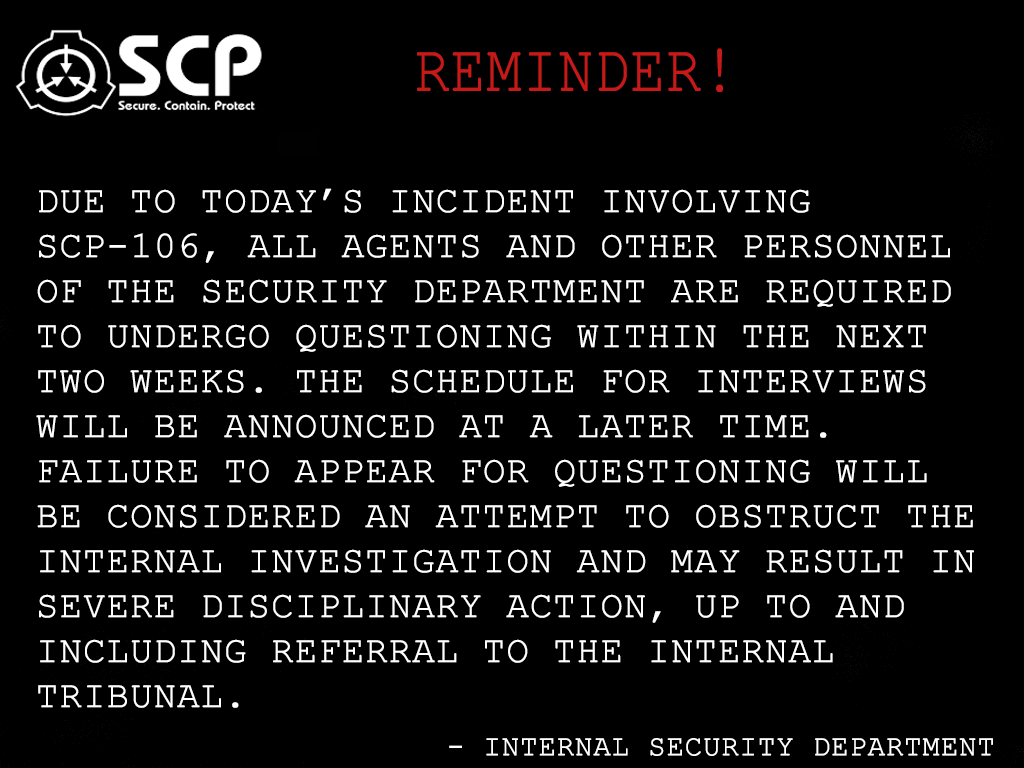
<style>
.page{position:relative;width:1024px;height:768px;background:#000000}
.page>*{position:absolute;margin:0}
.t1{font:66.7px "CourierNewPSMT";color:#c81919;text-transform:uppercase;font-weight:bold;scale:0.86 1}
.t2{font:37.5px "CourierNewPSMT";color:#ffffff;text-transform:uppercase;font-weight:bold}
.t3{font:41.7px "CourierNewPSMT";color:#ffffff;text-transform:uppercase;font-weight:bold}
.t4{font:29.2px "CourierNewPSMT";color:#ffffff;text-transform:uppercase;font-weight:bold}
</style>
<div class="page">
<p class="t1" style="left:417px;top:48px;width:306px;height:44px">Reminder!</p>
<p class="t2" style="left:36px;top:188px;width:938px;height:520px;text-align:justify"><span class="t3"><br></span>Due to today’s incident involving SCP-106, all agents and other personnel of the Security Department are required to undergo questioning within the next two weeks. The schedule for interviews will be announced at a later time. Failure to appear for questioning will be considered an attempt to obstruct the internal investigation and may result in severe disciplinary action, up to and including referral to the Internal Tribunal.</p>
<p class="t4" style="left:449px;top:738px;width:544px;height:18px">- Internal Security Department</p>
</div>
